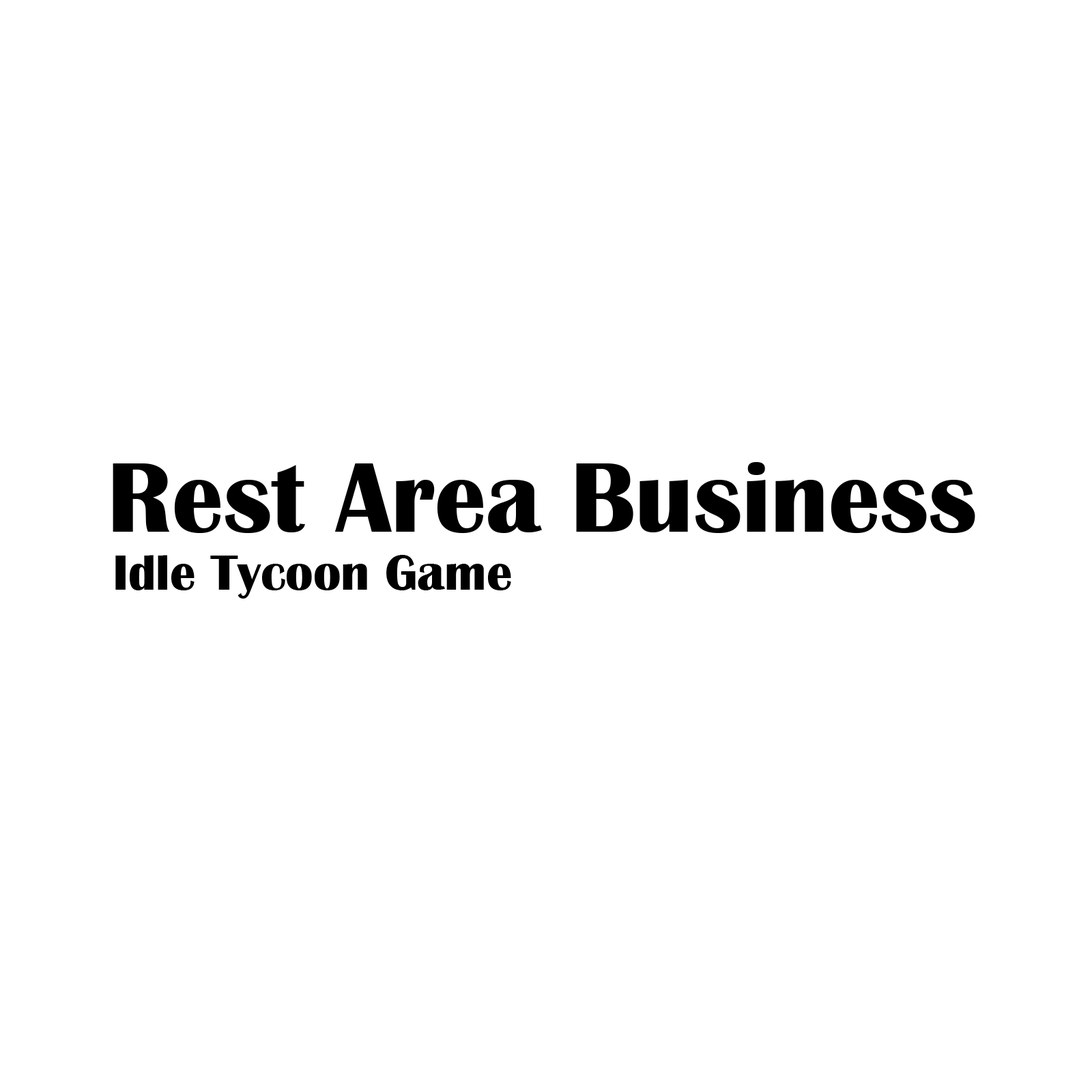
<style>
.page{position:relative;width:1092px;height:1092px;background:#ffffff}
.page>*{position:absolute;margin:0}
.t1{font:102.4px "BritannicBold";color:#000000}
.t2{font:51.2px "BritannicBold";color:#000000}
</style>
<div class="page">
<p class="t1" style="left:113px;top:462px;width:862px;height:71px">Rest Area Business</p>
<p class="t2" style="left:115px;top:555px;width:396px;height:44px">Idle Tycoon Game</p>
</div>
